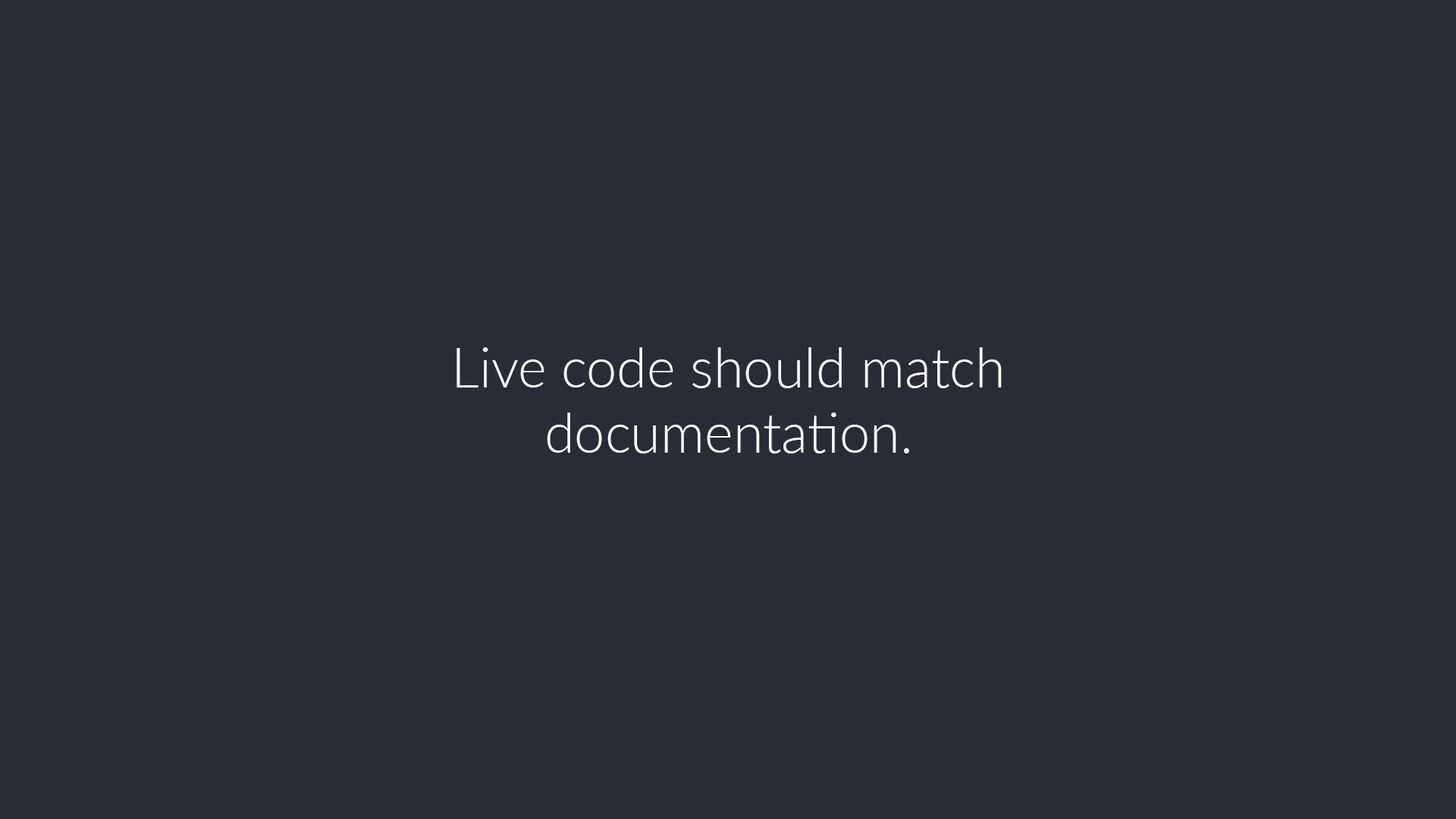
<style>
.page{position:relative;width:1456px;height:819px;background:#282c35}
.page>*{position:absolute;margin:0}
.t1{font:54.6px "Lato-Light";color:#ffffff}
</style>
<div class="page">
<p class="t1" style="left:457px;top:347px;width:545px;height:106px;text-align:center">Live code should match documentation.</p>
</div>
